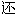
<style>
.page{position:relative;width:16px;height:16px;background:#ffffff}
.page>*{position:absolute;margin:0}
.t1{font:14px "NSimSun";color:#000000}
</style>
<div class="page">
<p class="t1" style="left:2px;top:1px;width:13px;height:13px">还</p>
</div>
